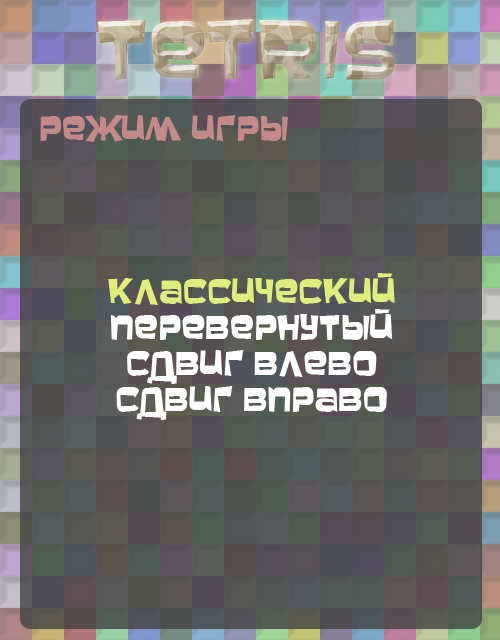
<style>
.page{position:relative;width:500px;height:640px}
.page>*{position:absolute;margin:0}
.t1{font:72px "m_Baveuse"}
.t2{font:30px "m_Baveuse";color:#c48989}
.t3{font:30px "m_Baveuse";color:#ffffff}
.t4{font:30px "m_Baveuse";color:#dfed7f}
</style>
<div class="page">
<p class="t1" style="left:97px;top:19px;width:298px;height:61px">Tetris</p>
<p class="t2" style="left:40px;top:115px;width:248px;height:27px">Режим игры</p>
<p class="t3" style="left:108px;top:273px;width:287px;height:147px;text-align:center"><span class="t4">Классический<br></span>перевернутый<br>сдвиг влево<br>сдвиг вправо</p>
</div>
